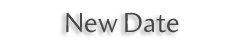
<style>
.page{position:relative;width:246px;height:48px;background:#ffffff}
.page>*{position:absolute;margin:0}
.t1{font:28px "Amira-Roman";color:#474747}
</style>
<div class="page">
<p class="t1" style="left:66px;top:12px;width:113px;height:21px">New Date</p>
</div>
